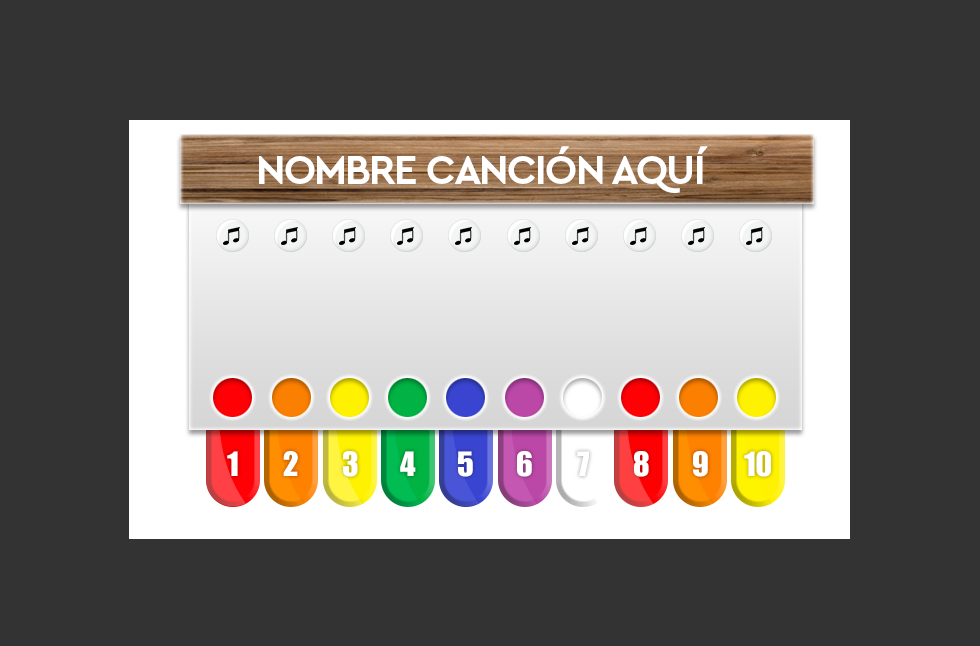
<style>
.page{position:relative;width:980px;height:646px;background:#333333}
.page>*{position:absolute;margin:0}
.t1{font:41.6px "Cera-Bold";letter-spacing:-0.045em;color:#ffffff;text-transform:uppercase}
.t2{font:31.1px "Impact";color:#ffffff}
</style>
<div class="page">
<p class="t1" style="left:259px;top:146px;width:449px;height:47px">nombre canción aquí</p>
<p class="t2" style="left:227px;top:451px;width:11px;height:25px">1</p>
<p class="t2" style="left:283px;top:451px;width:15px;height:25px">2</p>
<p class="t2" style="left:343px;top:451px;width:15px;height:26px">3</p>
<p class="t2" style="left:400px;top:451px;width:16px;height:25px">4</p>
<p class="t2" style="left:458px;top:451px;width:15px;height:26px">5</p>
<p class="t2" style="left:517px;top:451px;width:15px;height:26px">6</p>
<p class="t2" style="left:577px;top:451px;width:12px;height:25px">7</p>
<p class="t2" style="left:634px;top:451px;width:15px;height:26px">8</p>
<p class="t2" style="left:693px;top:451px;width:15px;height:26px">9</p>
<p class="t2" style="left:744px;top:451px;width:27px;height:26px">10</p>
</div>
